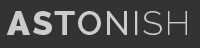
<style>
.page{position:relative;width:200px;height:48px;background:#333333}
.page>*{position:absolute;margin:0}
.t1{font:34px "Raleway-Heavy";letter-spacing:0.05em;color:#cccccc}
.t2{font:34px "Raleway-ExtraBold";letter-spacing:0.05em;color:#cccccc}
.t3{font:34px "Raleway-Bold";letter-spacing:0.05em;color:#cccccc}
.t4{font:34px "Raleway-SemiBold";letter-spacing:0.05em;color:#cccccc}
.t5{font:34px "Raleway-Medium";letter-spacing:0.05em;color:#cccccc}
.t6{font:34px "Raleway-Regular";letter-spacing:0.05em;color:#cccccc}
.t7{font:34px "Raleway-Light";letter-spacing:0.05em;color:#cccccc}
.t8{font:34px "Raleway-ExtraLight";letter-spacing:0.05em;color:#cccccc}
</style>
<div class="page">
<p class="t1" style="left:6px;top:11px;width:181px;height:24px">A<span class="t2">S</span><span class="t3">T</span><span class="t4">O</span><span class="t5">N</span><span class="t6">I</span><span class="t7">S</span><span class="t8">H</span></p>
</div>
